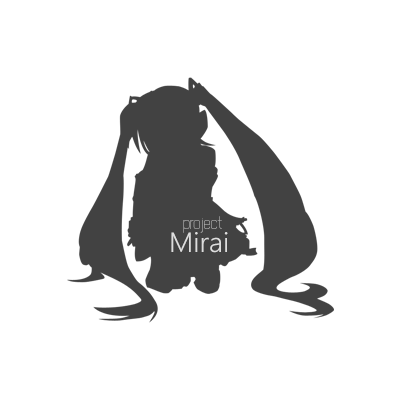
<style>
.page{position:relative;width:400px;height:400px;background:#ffffff}
.page>*{position:absolute;margin:0}
.t1{font:16px "NewMedia"}
.t2{font:28px "WeblySleekUISemilight";color:#dddddd}
</style>
<div class="page">
<p class="t1" style="left:183px;top:216px;width:39px;height:17px">project</p>
<p class="t2" style="left:171px;top:232px;width:57px;height:21px">Mirai</p>
</div>
